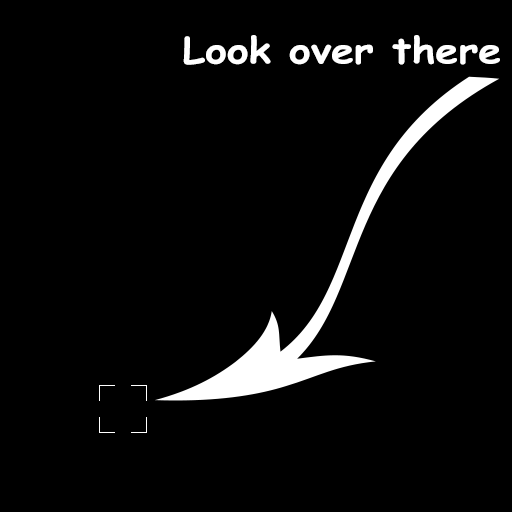
<style>
.page{position:relative;width:512px;height:512px;background:#000000}
.page>*{position:absolute;margin:0}
.t1{font:36px "ComicSansMS-Bold";color:#ffffff;scale:1.15 1}
</style>
<div class="page">
<p class="t1" style="left:183px;top:35px;width:317px;height:30px">Look over there</p>
</div>
